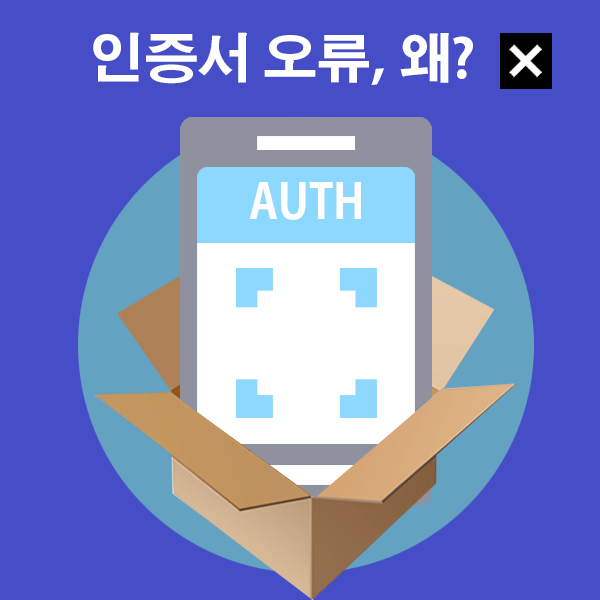
<style>
.page{position:relative;width:600px;height:600px;background:#454dc7}
.page>*{position:absolute;margin:0}
.t1{font:53.2px "AdobeGothicStd-Bold";color:#ffffff}
.t2{font:47.6px "AdobeGothicStd-Bold";color:#ffffff;scale:0.92 1}
</style>
<div class="page">
<p class="t1" style="left:93px;top:32px;width:380px;height:53px">인증서 오류, 왜?</p>
<p class="t2" style="left:249px;top:182px;width:112px;height:38px">AUTH</p>
</div>
